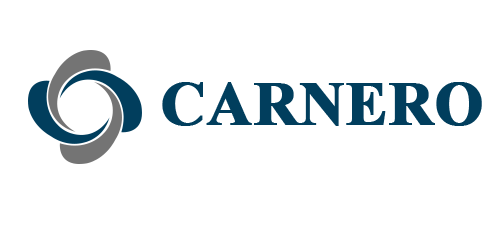
<style>
.page{position:relative;width:500px;height:225px;background:#ffffff}
.page>*{position:absolute;margin:0}
.t1{font:61.7px "TimesNewRomanPS-BoldMT";color:#013e5d;text-transform:uppercase;font-weight:bold}
</style>
<div class="page">
<p class="t1" style="left:162px;top:82px;width:320px;height:44px">carnero</p>
</div>
